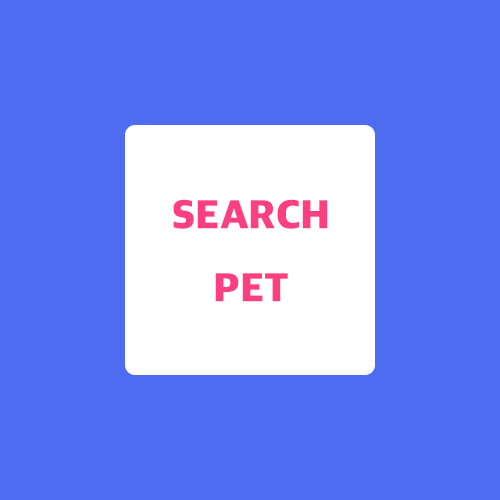
<style>
.page{position:relative;width:500px;height:500px;background:#4e6cef}
.page>*{position:absolute;margin:0}
.t1{font:41.7px "AppleSDGothicNeo-Heavy";color:#fc3f81}
</style>
<div class="page">
<p class="t1" style="left:173px;top:199px;width:155px;height:103px;text-align:center">SEARCH<br>PET</p>
</div>
